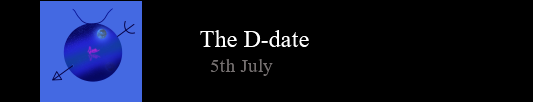
<style>
.page{position:relative;width:533px;height:102px;background:#000000}
.page>*{position:absolute;margin:0}
.t1{font:24px "TimesNewRomanPSMT";color:#ffffff}
.t2{font:18.7px "TimesNewRomanPSMT";color:#757070}
</style>
<div class="page">
<p class="t1" style="left:200px;top:30px;width:109px;height:17px">The D-date</p>
<p class="t2" style="left:210px;top:59px;width:63px;height:17px">5th July</p>
</div>
